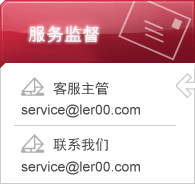
<style>
.page{position:relative;width:195px;height:184px;background:#ffffff}
.page>*{position:absolute;margin:0}
.t1{font:18px "SimHei";color:#ffffff}
.t2{font:14px "SimHei";color:#4a4a4a}
.t3{font:14px "ArialMT";color:#4a4a4a}
</style>
<div class="page">
<p class="t1" style="left:28px;top:25px;width:72px;height:18px">服务监督</p>
<p class="t2" style="left:53px;top:82px;width:56px;height:13px">客服主管</p>
<p class="t3" style="left:21px;top:104px;width:119px;height:14px">service@ler00.com</p>
<p class="t2" style="left:53px;top:138px;width:55px;height:13px">联系我们</p>
<p class="t3" style="left:21px;top:161px;width:119px;height:14px">service@ler00.com</p>
</div>
